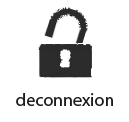
<style>
.page{position:relative;width:129px;height:122px;background:#ffffff}
.page>*{position:absolute;margin:0}
.t1{font:18px "MyriadPro-Regular";color:#201b1b}
</style>
<div class="page">
<p class="t1" style="left:16px;top:93px;width:97px;height:13px">deconnexion</p>
</div>
